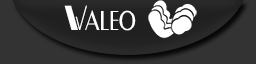
<style>
.page{position:relative;width:256px;height:64px;background:#333333}
.page>*{position:absolute;margin:0}
.t1{font:36px "RightBankFLF";color:#ffffff}
</style>
<div class="page">
<p class="t1" style="left:64px;top:5px;width:72px;height:26px">Valeo</p>
</div>
